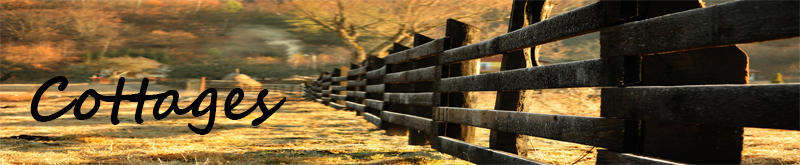
<style>
.page{position:relative;width:800px;height:165px}
.page>*{position:absolute;margin:0}
.t1{font:60px "SegoeScript-Bold";color:#000000}
</style>
<div class="page">
<p class="t1" style="left:30px;top:76px;width:257px;height:59px">Cottages</p>
</div>
